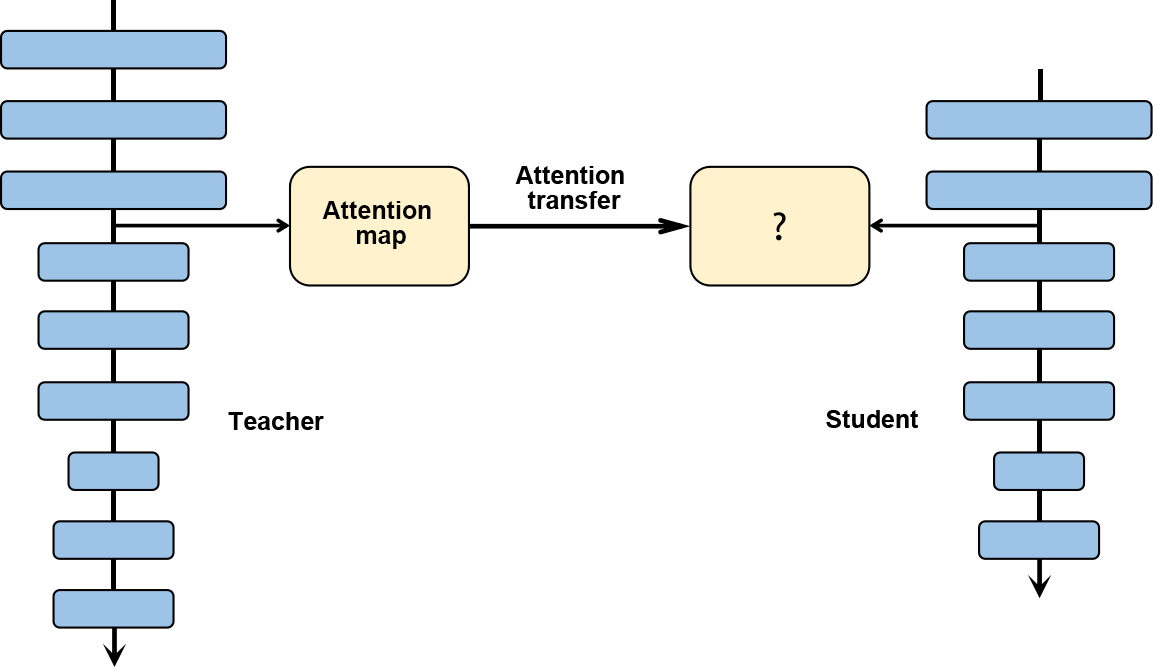
<style>
.page{position:relative;width:1153px;height:668px;background:#ffffff}
.page>*{position:absolute;margin:0}
.t1{font:12px/25px "Arial-BoldMT";color:#000000}
.t2{font:12px "Arial-BoldMT";color:#000000}
</style>
<div class="page">
<p class="t1" style="left:515px;top:166px;width:109px;height:43px;text-align:center">Attention <br>transfer</p>
<p class="t1" style="left:322px;top:201px;width:109px;height:48px;text-align:center">Attention <br>map</p>
<p class="t2" style="left:228px;top:412px;width:96px;height:18px">Teacher</p>
<p class="t2" style="left:826px;top:410px;width:92px;height:18px">Student</p>
</div>
